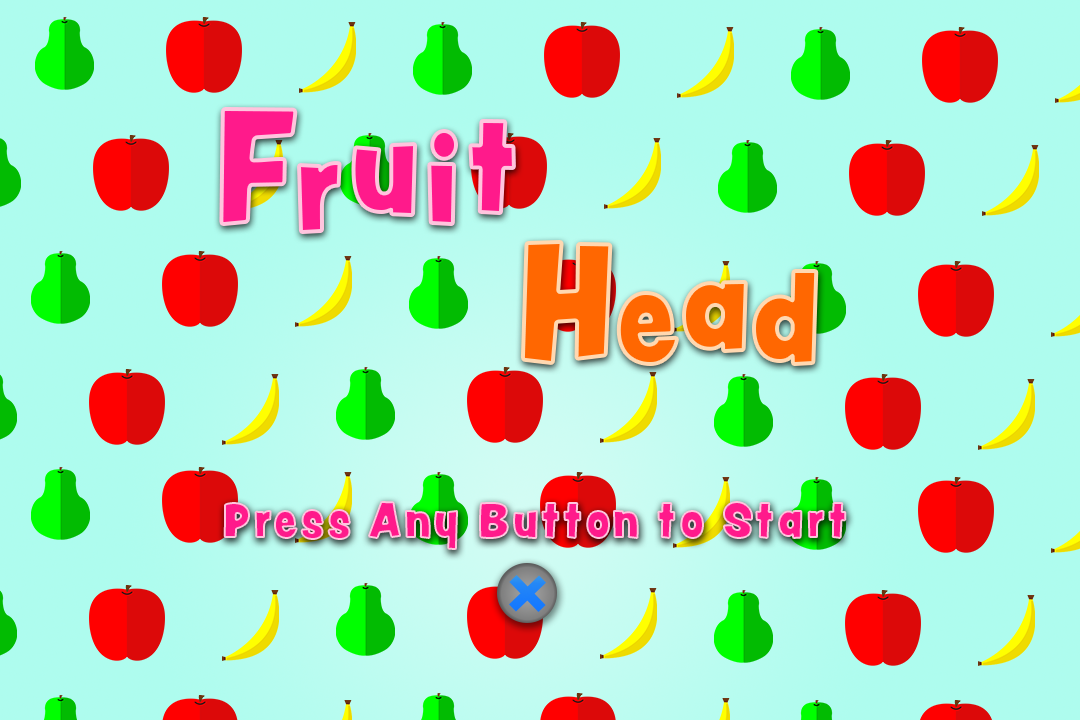
<style>
.page{position:relative;width:1080px;height:720px;background:#aefcee}
.page>*{position:absolute;margin:0}
.t1{font:144px "PeachyKeenJF";letter-spacing:0.1em;color:#ff1a8b;scale:0.9 1}
.t2{font:115.2px "PeachyKeenJF";letter-spacing:0.1em;color:#ff1a8b;scale:0.9 1}
.t3{font:144px "PeachyKeenJF";letter-spacing:0.1em;color:#ff6701;scale:0.9 1}
.t4{font:115.2px "PeachyKeenJF";letter-spacing:0.1em;color:#ff6701;scale:0.9 1}
.t5{font:43.2px "PeachyKeenJF";letter-spacing:0.1em;color:#ff1a8b;scale:0.9 1}
</style>
<div class="page">
<p class="t1" style="left:221px;top:109px;width:75px;height:115px">F</p>
<p class="t2" style="left:470px;top:121px;width:44px;height:92px">t</p>
<p class="t2" style="left:429px;top:131px;width:27px;height:93px">i</p>
<p class="t2" style="left:353px;top:144px;width:63px;height:71px">u</p>
<p class="t2" style="left:299px;top:163px;width:41px;height:69px">r</p>
<p class="t3" style="left:522px;top:242px;width:89px;height:121px">H</p>
<p class="t4" style="left:754px;top:271px;width:63px;height:93px">d</p>
<p class="t4" style="left:618px;top:293px;width:59px;height:71px">e</p>
<p class="t4" style="left:684px;top:282px;width:62px;height:69px">a</p>
<p class="t5" style="left:224px;top:502px;width:622px;height:47px">Press Any Button to Start</p>
</div>
